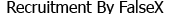
<style>
.page{position:relative;width:172px;height:14px;background:#ffffff}
.page>*{position:absolute;margin:0}
.t1{font:16px "Tahoma";color:#000000}
</style>
<div class="page">
<p class="t1" style="left:7px;top:0px;width:157px;height:16px">Recruitment By FalseX</p>
</div>
